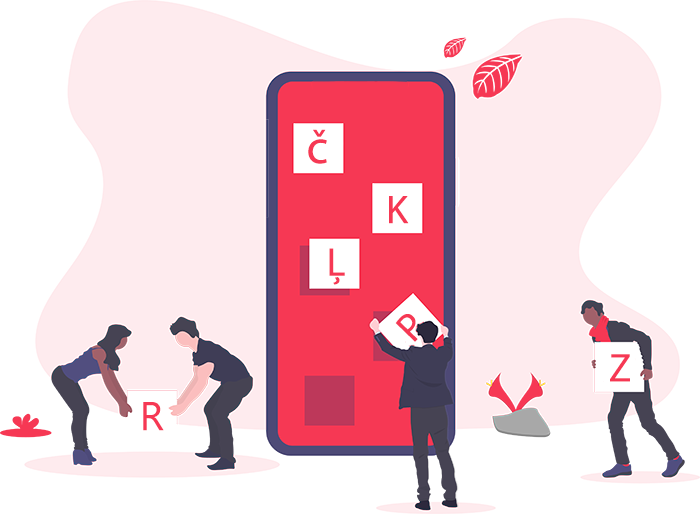
<style>
.page{position:relative;width:700px;height:514px;background:#ffffff}
.page>*{position:absolute;margin:0}
.t1{font:48px "MyriadPro-Regular";color:#f63854}
.t2{font:40px "MyriadPro-Regular";color:#f63854}
.t3{font:40px "SegoeUISymbol";color:#f63854}
</style>
<div class="page">
<p class="t1" style="left:308px;top:129px;width:19px;height:35px">č</p>
<p class="t2" style="left:389px;top:196px;width:20px;height:28px">K</p>
<p class="t2" style="left:329px;top:248px;width:16px;height:37px">Ļ</p>
<p class="t2" style="left:395px;top:314px;width:23px;height:28px;rotate:-46deg">P</p>
<p class="t2" style="left:610px;top:354px;width:20px;height:28px">Z</p>
<p class="t3" style="left:143px;top:402px;width:21px;height:29px">R</p>
</div>
